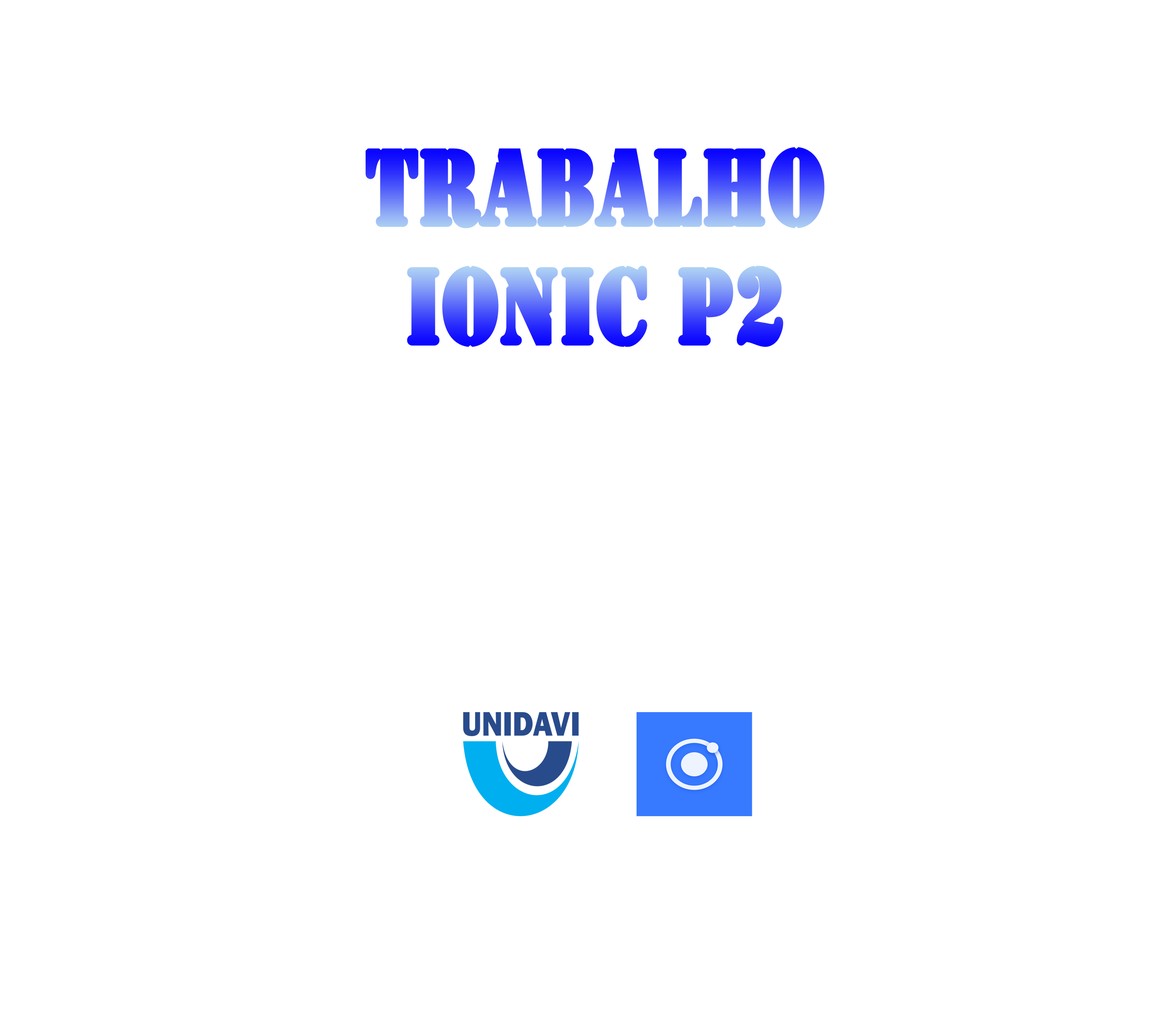
<style>
.page{position:relative;width:1172px;height:1018px;background:#ffffff}
.page>*{position:absolute;margin:0}
.t1{font:98.8px "StencilStd";font-weight:bold;scale:0.78 1}
</style>
<div class="page">
<p class="t1" style="left:365px;top:147px;width:459px;height:200px;text-align:center">Trabalho<br>Ionic P2</p>
</div>
